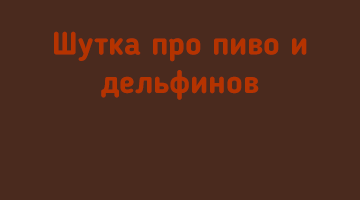
<style>
.page{position:relative;width:360px;height:200px;background:#4a2a1e}
.page>*{position:absolute;margin:0}
.t1{font:32px "BloggerSans-Bold";color:#b53300}
</style>
<div class="page">
<p class="t1" style="left:54px;top:31px;width:253px;height:69px;text-align:center">Шутка про пиво и<br>дельфинов</p>
</div>
